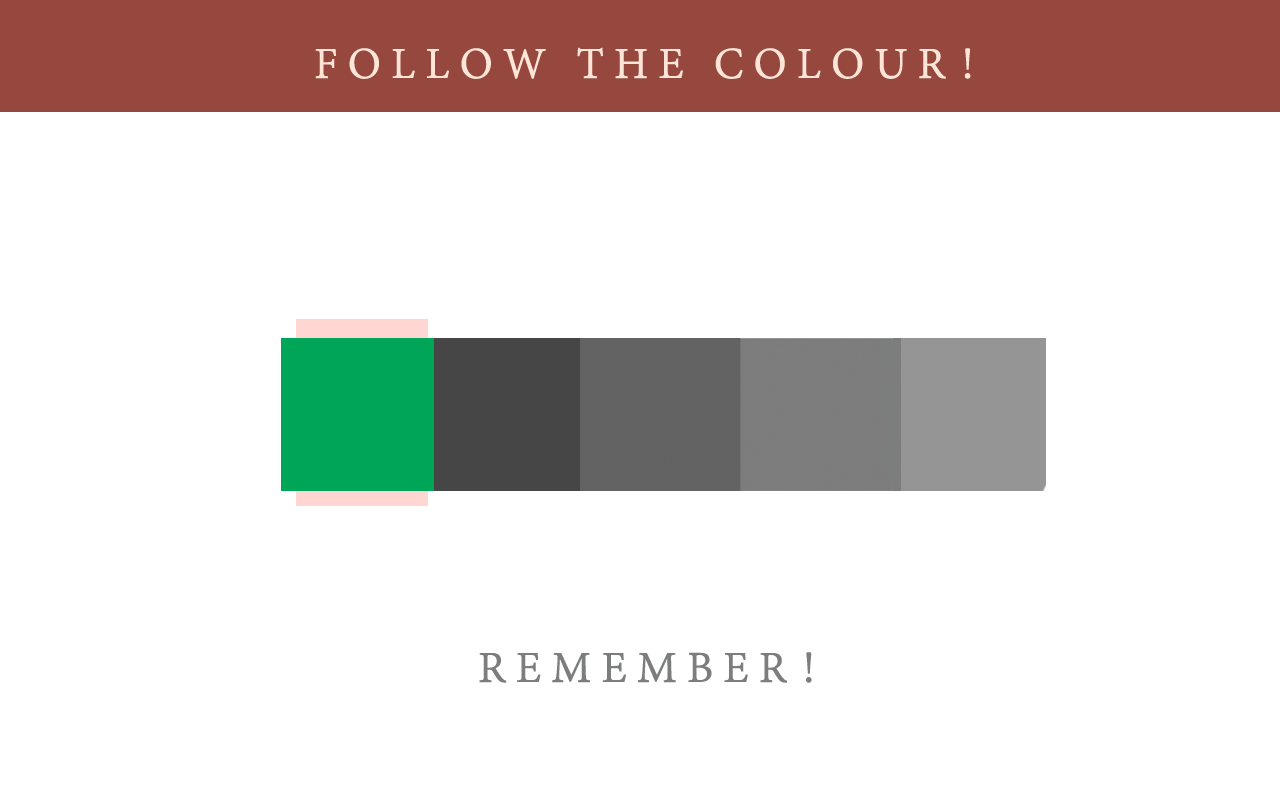
<style>
.page{position:relative;width:1280px;height:800px;background:#ffffff}
.page>*{position:absolute;margin:0}
.t1{font:48px "AdobeDevanagari-Regular";letter-spacing:0.2em;color:#ffe5d7;text-transform:uppercase;font-weight:bold}
.t2{font:48px "AdobeDevanagari-Regular";letter-spacing:0.2em;color:#7c7d7d;text-transform:uppercase;font-weight:bold}
</style>
<div class="page">
<p class="t1" style="left:315px;top:47px;width:656px;height:32px">Follow the Colour!</p>
<p class="t2" style="left:479px;top:652px;width:333px;height:31px">Remember!</p>
</div>
